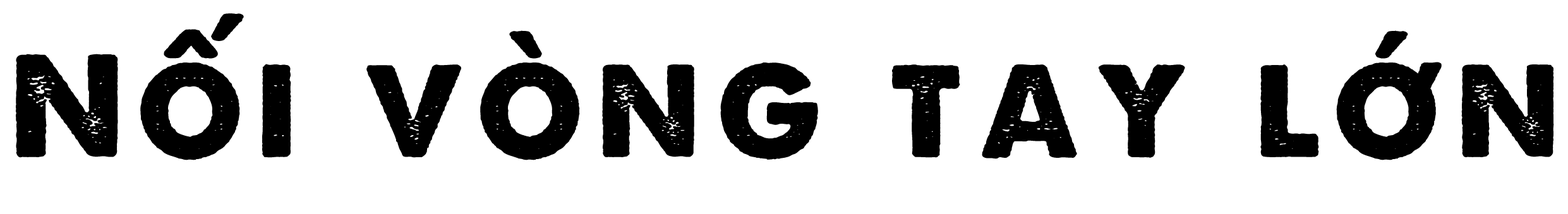
<style>
.page{position:relative;width:1568px;height:214px;background:#ffffff}
.page>*{position:absolute;margin:0}
.t1{font:153.7px "SVN-ALoveOfThunder";letter-spacing:0.1em;color:#000000}
</style>
<div class="page">
<p class="t1" style="left:16px;top:13px;width:1538px;height:147px">Nối vòng tay lớn</p>
</div>
